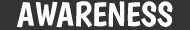
<style>
.page{position:relative;width:190px;height:30px;background:#333333}
.page>*{position:absolute;margin:0}
.t1{font:34px "Boogaloo-Regular";color:#ffffff}
</style>
<div class="page">
<p class="t1" style="left:17px;top:1px;width:156px;height:27px">AWARENESS</p>
</div>
